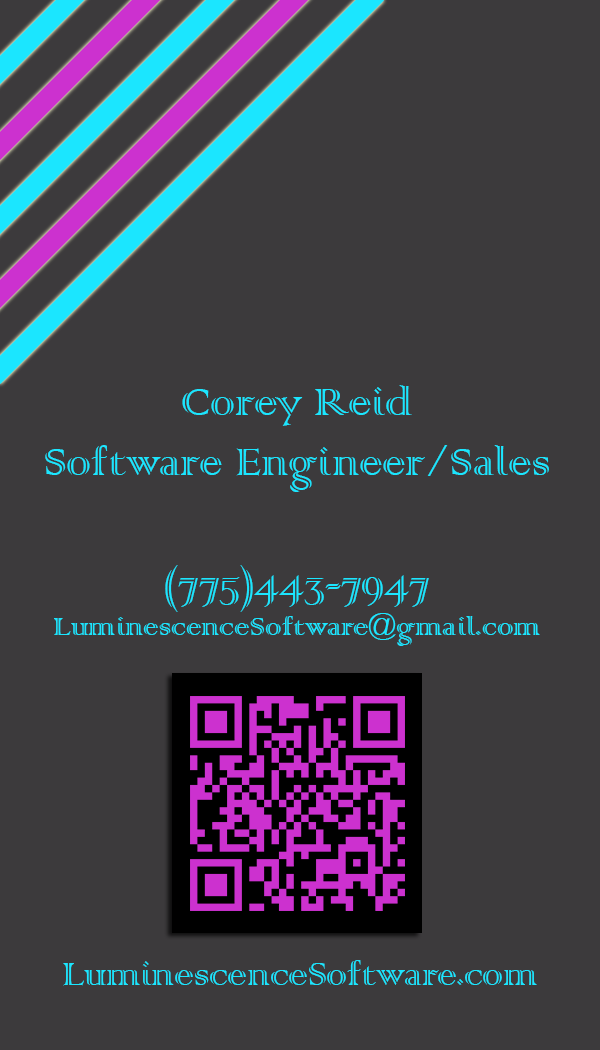
<style>
.page{position:relative;width:600px;height:1050px;background:#3c3a3c}
.page>*{position:absolute;margin:0}
.t1{font:50px "ColonnaMT";color:#1be6ff}
.t2{font:33.3px "ColonnaMT";color:#1be6ff}
.t3{font:41.7px "ColonnaMT";color:#1be6ff}
</style>
<div class="page">
<p class="t1" style="left:45px;top:385px;width:504px;height:261px;text-align:center">Corey Reid<br>Software Engineer/Sales<br><br>(775)443-7947<br><span class="t2">LuminescenceSoftware@gmail.com</span></p>
<p class="t3" style="left:63px;top:960px;width:474px;height:26px">LuminescenceSoftware.com</p>
</div>
